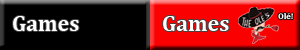
<style>
.page{position:relative;width:300px;height:50px;background:#000000}
.page>*{position:absolute;margin:0}
.t1{font:22px "Cambria-Bold";color:#ffffff}
.t2{font:8.3px "Cambria-Bold";color:#ffffff}
</style>
<div class="page">
<p class="t1" style="left:13px;top:16px;width:66px;height:15px">Games</p>
<p class="t1" style="left:163px;top:16px;width:66px;height:15px">Games</p>
<p class="t2" style="left:278px;top:12px;width:15px;height:8px">Olé!</p>
</div>
